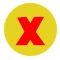
<style>
.page{position:relative;width:60px;height:60px;background:#e5d221}
.page>*{position:absolute;margin:0}
.t1{font:35.5px "CartoonistKooky";color:#ff0000;scale:1.34 1}
</style>
<div class="page">
<p class="t1" style="left:15px;top:16px;width:31px;height:30px">x</p>
</div>
